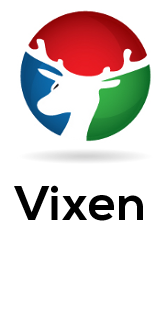
<style>
.page{position:relative;width:164px;height:314px;background:#ffffff}
.page>*{position:absolute;margin:0}
.t1{font:49px "NexaBold";color:#000000}
</style>
<div class="page">
<p class="t1" style="left:14px;top:185px;width:129px;height:36px">Vixen</p>
</div>
